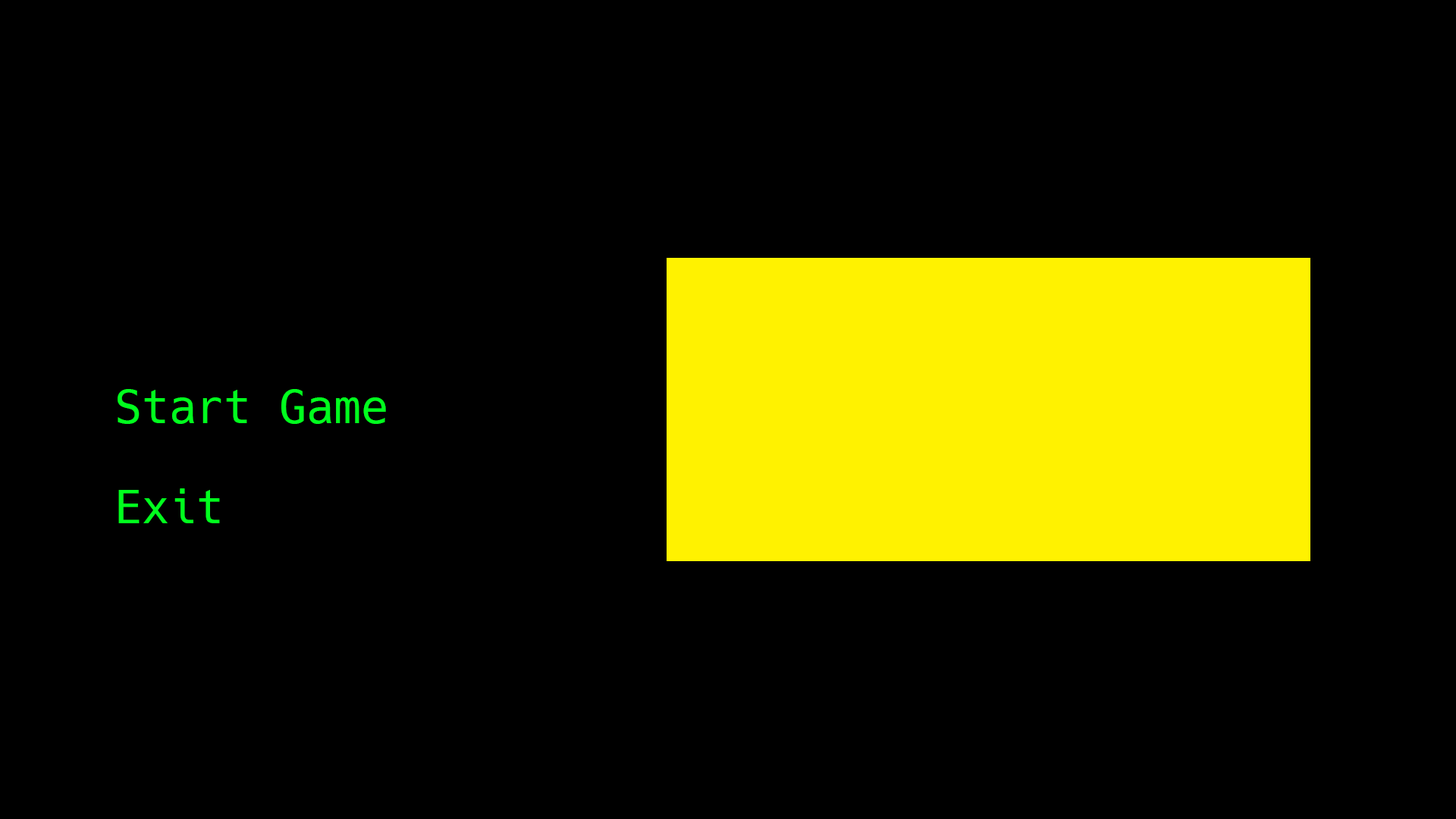
<style>
.page{position:relative;width:1456px;height:819px;background:#000000}
.page>*{position:absolute;margin:0}
.t1{font:45.5px "Hack-Regular";color:#00ff1e}
</style>
<div class="page">
<p class="t1" style="left:118px;top:389px;width:268px;height:35px">Start Game</p>
<p class="t1" style="left:118px;top:488px;width:102px;height:35px">Exit</p>
</div>
